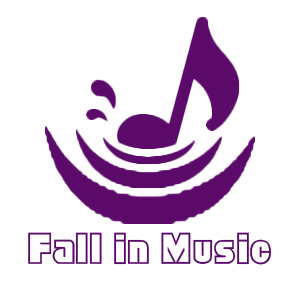
<style>
.page{position:relative;width:300px;height:300px;background:#ffffff}
.page>*{position:absolute;margin:0}
.t1{font:38.9px "YJ-BLOCK-Medium";color:#5b0a6a}
</style>
<div class="page">
<p class="t1" style="left:28px;top:232px;width:244px;height:33px">Fall in Music</p>
</div>
